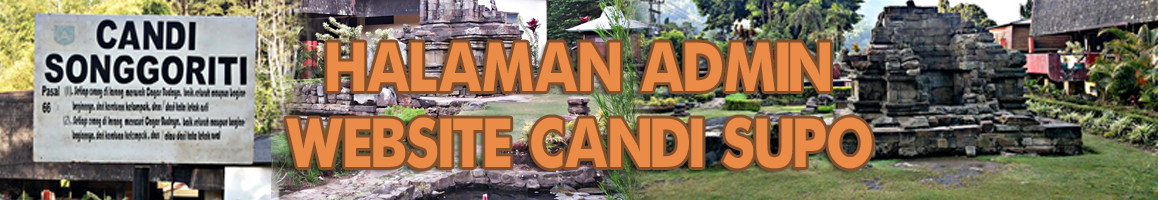
<style>
.page{position:relative;width:1158px;height:200px}
.page>*{position:absolute;margin:0}
.t1{font:62.7px "a-bug's-life-Regular";color:#ea8b48}
</style>
<div class="page">
<p class="t1" style="left:286px;top:42px;width:586px;height:127px;text-align:center">HALAMAN ADMIN <br>WEBSITE CANDI SUPO</p>
</div>
